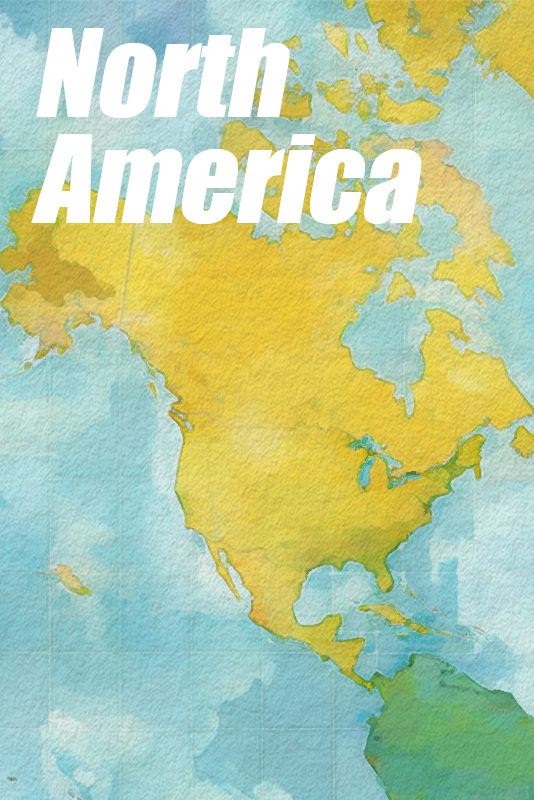
<style>
.page{position:relative;width:534px;height:800px}
.page>*{position:absolute;margin:0}
.t1{font:112px/106px "Impact";color:#ffffff;font-style:italic}
</style>
<div class="page">
<p class="t1" style="left:31px;top:28px;width:391px;height:196px">North<br>America</p>
</div>
